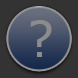
<style>
.page{position:relative;width:78px;height:78px;background:#333333}
.page>*{position:absolute;margin:0}
.t1{font:50px "Verdana";color:#8c8c8c}
</style>
<div class="page">
<p class="t1" style="left:30px;top:20px;width:22px;height:37px">?</p>
</div>
